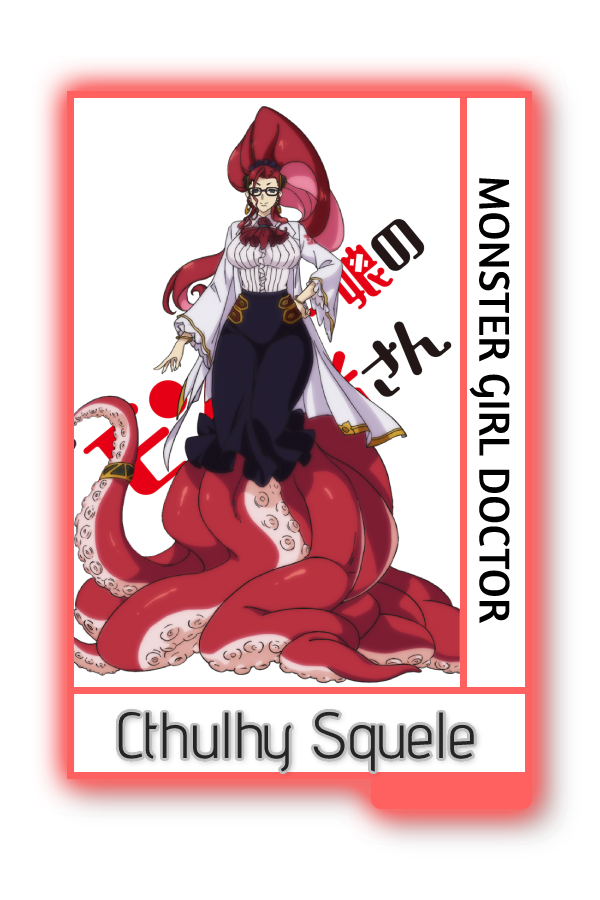
<style>
.page{position:relative;width:600px;height:900px;background:#ffffff}
.page>*{position:absolute;margin:0}
.t1{font:44px "Amaranth-Regular";color:#000000}
.t2{font:65px "AdventPro-Regular";color:#252525}
</style>
<div class="page">
<p class="t1" style="left:469px;top:178px;width:41px;height:446px;rotate:90deg">MONSTER GIRL DOCTOR</p>
<p class="t2" style="left:118px;top:711px;width:356px;height:61px">Cthulhy Squele</p>
</div>
